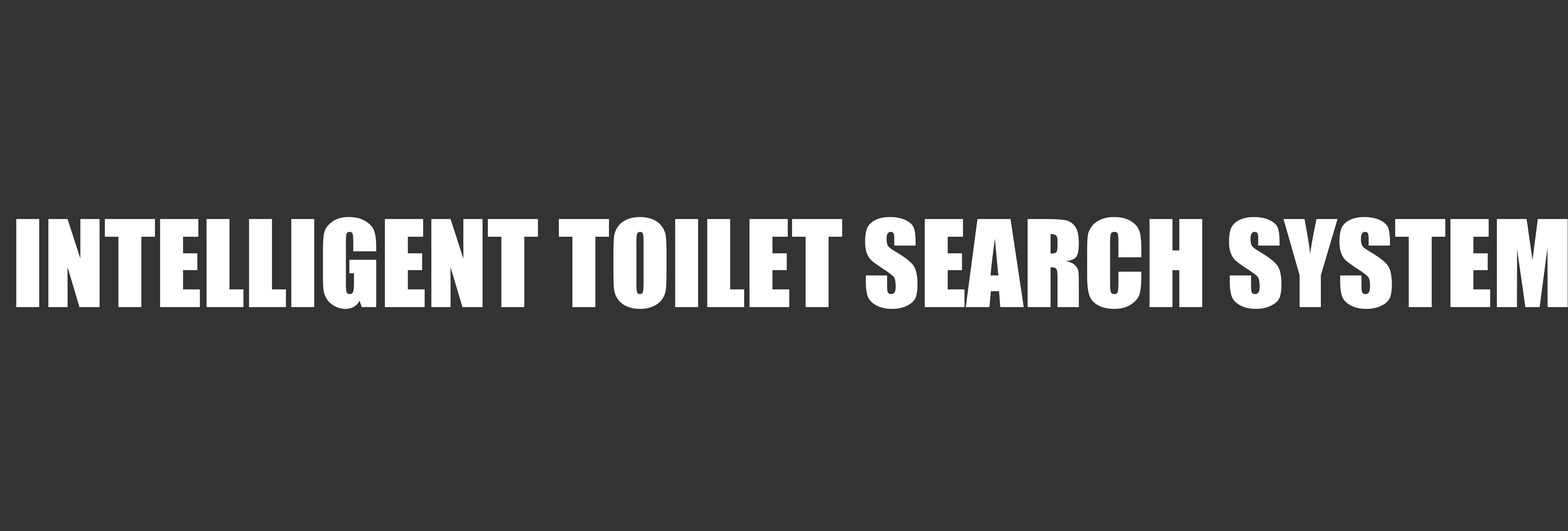
<style>
.page{position:relative;width:1568px;height:531px;background:#333333}
.page>*{position:absolute;margin:0}
.t1{font:111.5px "Impact";color:#ffffff}
</style>
<div class="page">
<p class="t1" style="left:16px;top:217px;width:1552px;height:92px">INTELLIGENT TOILET SEARCH SYSTEM</p>
</div>
